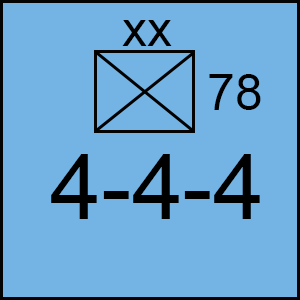
<style>
.page{position:relative;width:300px;height:300px;background:#74b4e4}
.page>*{position:absolute;margin:0}
.t1{font:50px "ArialMT";color:#000000}
.t2{font:91.7px "ArialMT";color:#000000}
</style>
<div class="page">
<p class="t1" style="left:122px;top:20px;width:50px;height:26px">xx</p>
<p class="t1" style="left:209px;top:74px;width:52px;height:36px">78</p>
<p class="t2" style="left:51px;top:154px;width:209px;height:65px">4-4-4</p>
</div>
